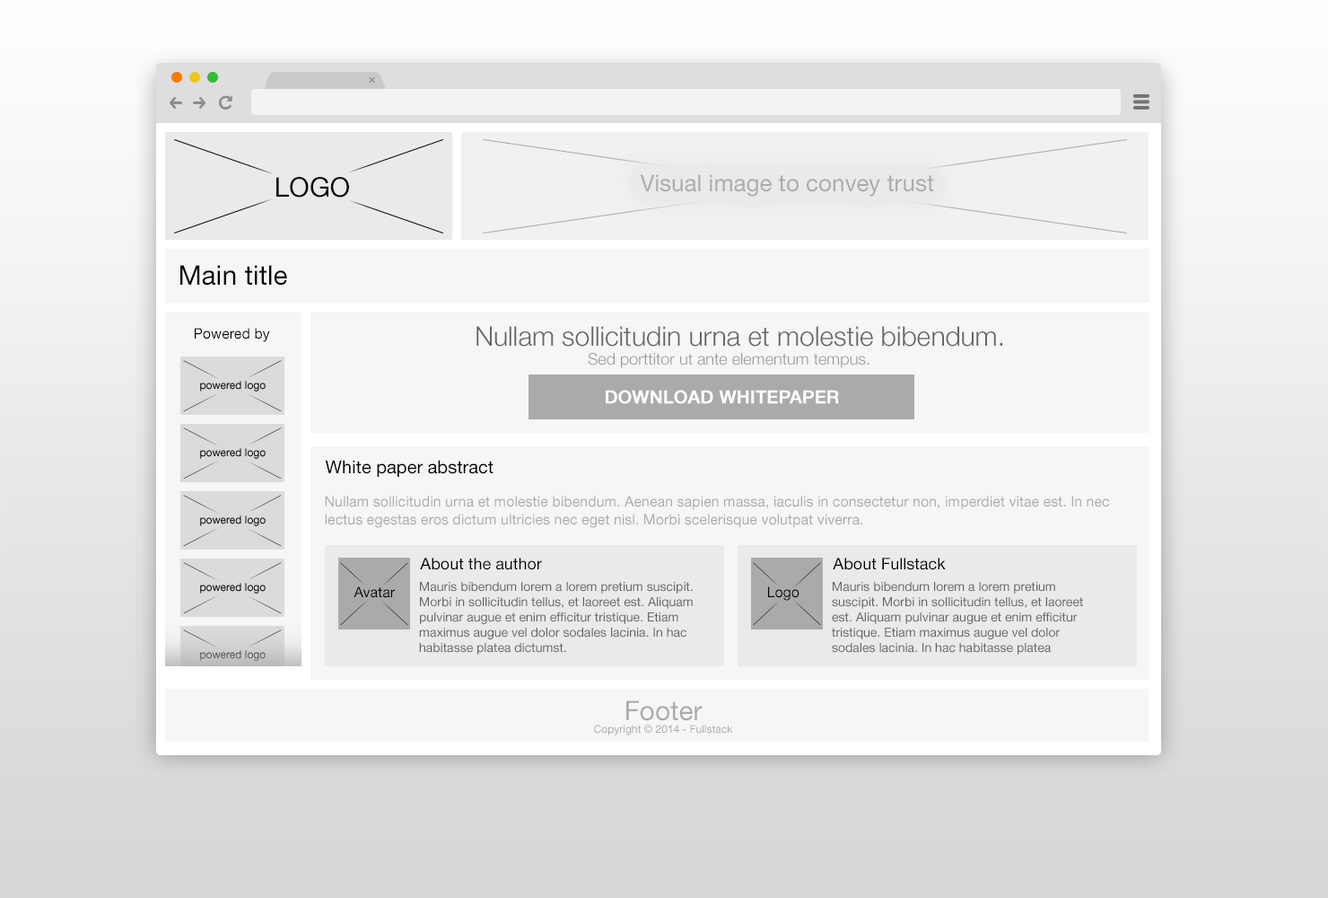
<style>
.page{position:relative;width:1328px;height:898px;background:#f6f6f6}
.page>*{position:absolute;margin:0}
.t1{font:20.8px "MavenProLight200-Regular"}
.t2{font:26.9px "HelveticaNeueLTStd-Roman";color:#000000}
.t3{font:23.3px "HelveticaNeueLTStd-Roman";color:#aaaaaa}
.t4{font:14.4px "HelveticaNeueLTStd-Roman";color:#000000}
.t5{font:26.9px "HelveticaNeueLTStd-Lt";color:#666666}
.t6{font:16.2px "HelveticaNeueLTStd-Lt";color:#999999}
.t7{font:18px "HelveticaNeueLTStd-Md";color:#ffffff;font-weight:bold}
.t8{font:18px "HelveticaNeueLTStd-Roman";color:#000000}
.t9{font:14.4px "HelveticaNeueLTStd-Roman";color:#aaaaaa}
.t10{font:16.2px "HelveticaNeueLTStd-Roman";color:#000000}
.t11{font:12.6px "HelveticaNeueLTStd-Roman";color:#666666}
.t12{font:10.8px "HelveticaNeueLTStd-Roman";color:#aaaaaa}
.t13{font:26.9px "HelveticaNeueLTStd-Roman";color:#aaaaaa}
</style>
<div class="page">
<p class="t1" style="left:369px;top:77px;width:6px;height:6px;rotate:-45deg">+</p>
<p class="t2" style="left:276px;top:177px;width:73px;height:20px">LOGO</p>
<p class="t3" style="left:640px;top:174px;width:294px;height:23px">Visual image to convey trust</p>
<p class="t2" style="left:180px;top:265px;width:107px;height:20px">Main title</p>
<p class="t4" style="left:195px;top:328px;width:75px;height:14px">Powered by</p>
<p class="t5" style="left:477px;top:326px;width:526px;height:20px">Nullam sollicitudin urna et molestie bibendum.</p>
<p class="t6" style="left:588px;top:353px;width:282px;height:15px">Sed porttitor ut ante elementum tempus.</p>
<p class="t7" style="left:606px;top:390px;width:233px;height:14px">DOWNLOAD WHITEPAPER</p>
<p class="t8" style="left:325px;top:460px;width:169px;height:17px">White paper abstract</p>
<p class="t9" style="left:325px;top:495px;width:784px;height:33px">Nullam sollicitudin urna et molestie bibendum. Aenean sapien massa, iaculis in consectetur non, imperdiet vitae est. In nec lectus egestas eros dictum ultricies nec eget nisl. Morbi scelerisque volutpat viverra.</p>
<p class="t10" style="left:420px;top:557px;width:122px;height:13px">About the author</p>
<p class="t10" style="left:833px;top:557px;width:113px;height:13px">About Fullstack</p>
<p class="t11" style="left:419px;top:582px;width:274px;height:72px">Mauris bibendum lorem a lorem pretium suscipit. Morbi in sollicitudin tellus, et laoreet est. Aliquam pulvinar augue et enim efficitur tristique. Etiam maximus augue vel dolor sodales lacinia. In hac habitasse platea dictumst.</p>
<p class="t11" style="left:832px;top:582px;width:251px;height:72px">Mauris bibendum lorem a lorem pretium suscipit. Morbi in sollicitudin tellus, et laoreet est. Aliquam pulvinar augue et enim efficitur tristique. Etiam maximus augue vel dolor sodales lacinia. In hac habitasse platea dictumst.</p>
<p class="t4" style="left:354px;top:586px;width:41px;height:12px">Avatar</p>
<p class="t4" style="left:768px;top:586px;width:32px;height:14px">Logo</p>
<p class="t12" style="left:594px;top:700px;width:139px;height:35px;text-align:center"><span class="t13">Footer<br></span>Copyright © 2014 - Fullstack</p>
</div>
